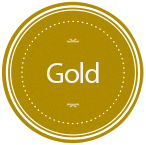
<style>
.page{position:relative;width:146px;height:145px;background:#ffffff}
.page>*{position:absolute;margin:0}
.t1{font:29px "MyriadPro-Regular";letter-spacing:-0.04em;color:#f5f5f5}
</style>
<div class="page">
<p class="t1" style="left:47px;top:62px;width:52px;height:21px">Gold</p>
</div>
